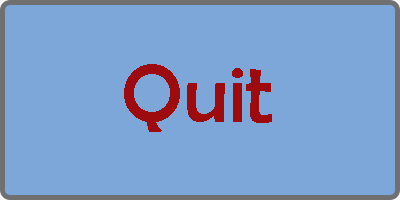
<style>
.page{position:relative;width:400px;height:200px;background:#7da7d9}
.page>*{position:absolute;margin:0}
.t1{font:83.3px "BerlinSansFB-Reg";color:#9e0b0f}
</style>
<div class="page">
<p class="t1" style="left:124px;top:64px;width:148px;height:68px">Quit</p>
</div>
